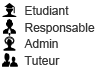
<style>
.page{position:relative;width:99px;height:73px;background:#ffffff}
.page>*{position:absolute;margin:0}
.t1{font:12px "ArialMT";color:#373737}
</style>
<div class="page">
<p class="t1" style="left:25px;top:6px;width:44px;height:9px">Etudiant</p>
<p class="t1" style="left:25px;top:23px;width:70px;height:11px">Responsable</p>
<p class="t1" style="left:24px;top:39px;width:34px;height:9px">Admin</p>
<p class="t1" style="left:24px;top:56px;width:36px;height:9px">Tuteur</p>
</div>
